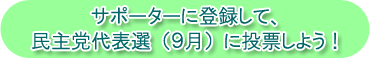
<style>
.page{position:relative;width:370px;height:58px;background:#99ff99}
.page>*{position:absolute;margin:0}
.t1{font:20px "HGPGothicM";color:#006666}
</style>
<div class="page">
<p class="t1" style="left:91px;top:6px;width:185px;height:20px">サポーターに登録して、</p>
<p class="t1" style="left:32px;top:31px;width:305px;height:19px">民主党代表選（９月）に投票しよう！</p>
</div>
